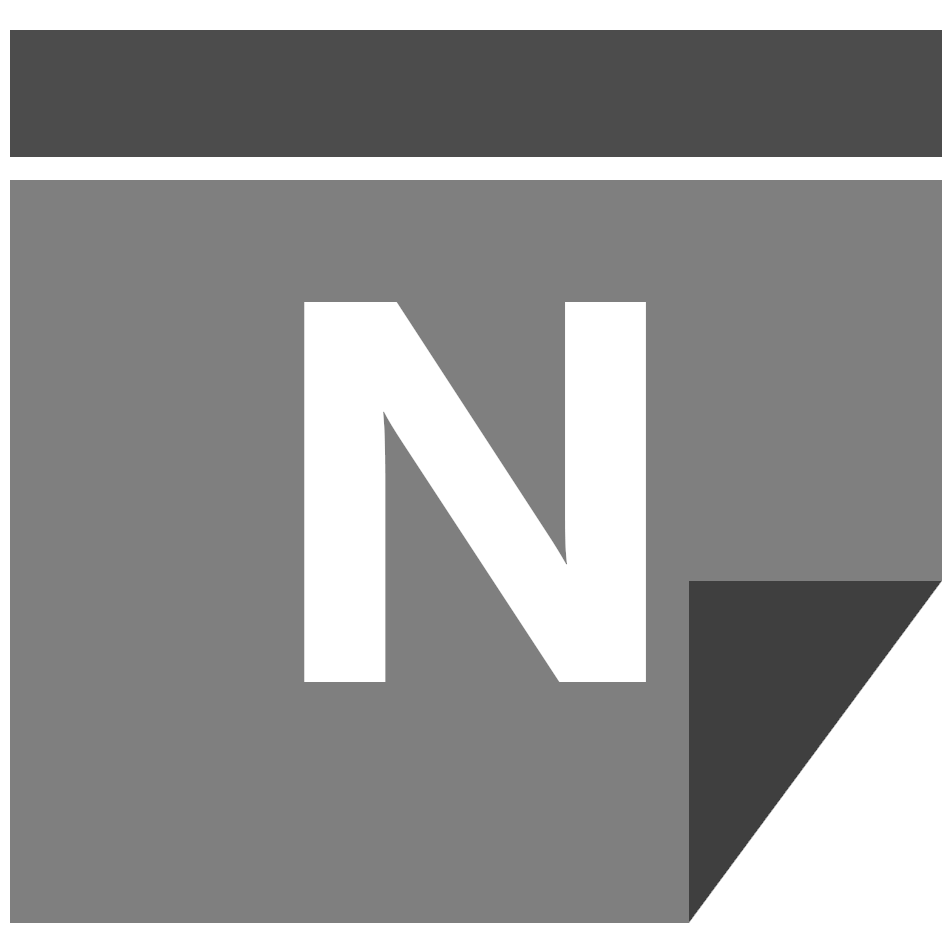
<style>
.page{position:relative;width:952px;height:952px;background:#7f7f7f}
.page>*{position:absolute;margin:0}
.t1{font:541.7px "SegoeUI-Bold";color:#ffffff}
</style>
<div class="page">
<p class="t1" style="left:304px;top:302px;width:342px;height:380px">N</p>
</div>
